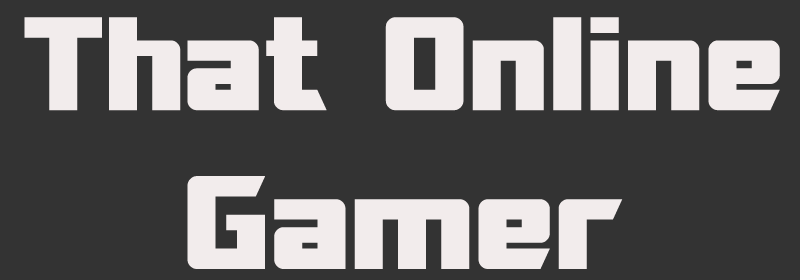
<style>
.page{position:relative;width:800px;height:280px;background:#333333}
.page>*{position:absolute;margin:0}
.t1{font:132.3px "SFTransRobotics";color:#f2ecec}
</style>
<div class="page">
<p class="t1" style="left:24px;top:17px;width:756px;height:252px;text-align:center">That Online<br>Gamer</p>
</div>
